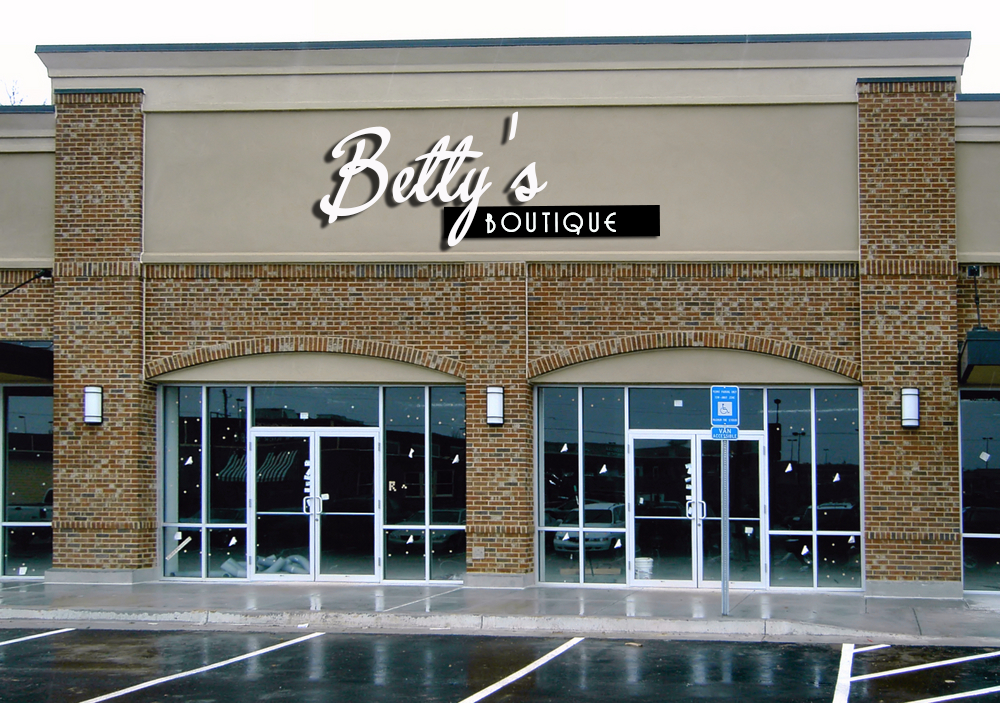
<style>
.page{position:relative;width:1000px;height:703px}
.page>*{position:absolute;margin:0}
.t1{font:114.7px "Yerbaluisa";letter-spacing:0.025em;color:#fbf9fb}
.t2{font:25.5px "GrenadierNF";letter-spacing:0.2em;color:#f8fdfc}
</style>
<div class="page">
<p class="t1" style="left:320px;top:111px;width:228px;height:136px">Betty’s</p>
<p class="t2" style="left:485px;top:212px;width:131px;height:23px">BOUTIQUE</p>
</div>
